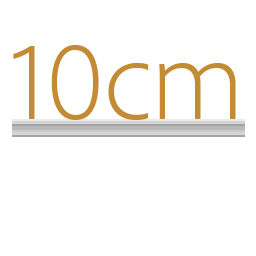
<style>
.page{position:relative;width:256px;height:256px;background:#ffffff}
.page>*{position:absolute;margin:0}
.t1{font:113.9px "AdobeClean-Light";color:#c38b33}
</style>
<div class="page">
<p class="t1" style="left:13px;top:44px;width:223px;height:77px">10cm</p>
</div>
